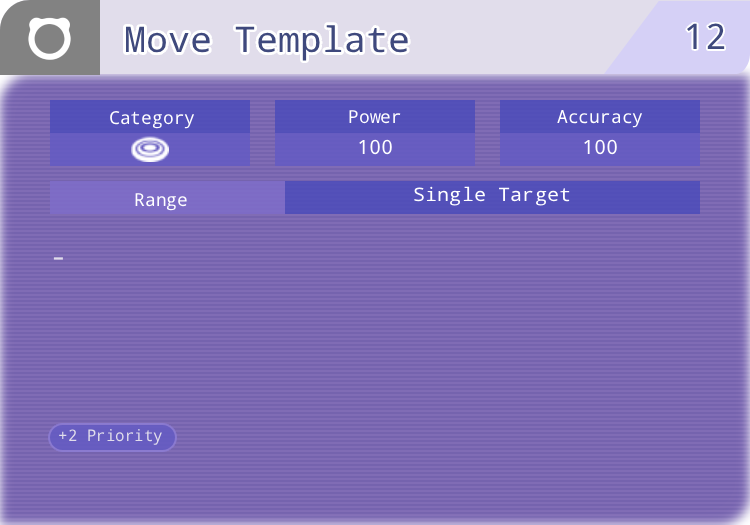
<style>
.page{position:relative;width:750px;height:525px;background:#806cb5}
.page>*{position:absolute;margin:0}
.t1{font:35.3px "DroidSansMono";color:#3f497d;scale:1.04 1}
.t2{font:18px "DroidSansMono";color:#ffffff}
.t3{font:19.6px "DroidSansMono";color:#ffffff;scale:1.04 1}
.t4{font:18.7px "DroidSansMono";color:#ffffff;scale:1.08 1}
.t5{font:28px "DroidSansMono";color:#e1ddeb}
.t6{font:16px "DroidSansMono";color:#e1ddeb}
</style>
<div class="page">
<p class="t1" style="left:126px;top:25px;width:282px;height:36px">Move Template</p>
<p class="t1" style="left:687px;top:23px;width:38px;height:26px">12</p>
<p class="t2" style="left:110px;top:110px;width:85px;height:19px">Category</p>
<p class="t2" style="left:349px;top:110px;width:52px;height:14px">Power</p>
<p class="t2" style="left:557px;top:110px;width:86px;height:18px">Accuracy</p>
<p class="t3" style="left:359px;top:139px;width:33px;height:16px">100</p>
<p class="t3" style="left:584px;top:139px;width:33px;height:16px">100</p>
<p class="t2" style="left:135px;top:193px;width:52px;height:18px">Range</p>
<p class="t4" style="left:414px;top:186px;width:156px;height:20px">Single Target</p>
<p class="t5" style="left:53px;top:257px;width:10px;height:3px">-</p>
<p class="t6" style="left:59px;top:429px;width:103px;height:16px">+2 Priority</p>
</div>
